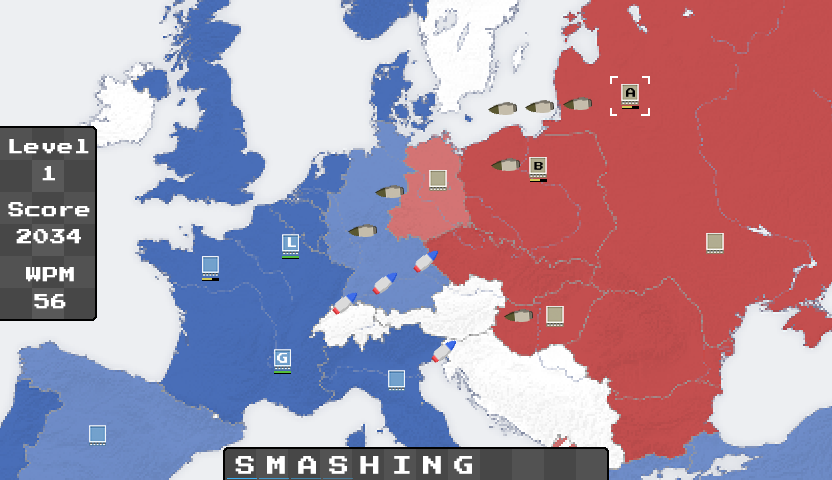
<style>
.page{position:relative;width:832px;height:480px}
.page>*{position:absolute;margin:0}
.t1{font:16px/27px "PressStart2P-Regular";letter-spacing:0.04em;color:#ffffff}
.t2{font:20px "PressStart2P-Regular";letter-spacing:0.56em;color:#ffffff}
</style>
<div class="page">
<p class="t1" style="left:9px;top:139px;width:80px;height:42px;text-align:center">Level<br>1</p>
<p class="t1" style="left:8px;top:202px;width:82px;height:42px;text-align:center">Score<br>2034</p>
<p class="t1" style="left:26px;top:267px;width:48px;height:42px;text-align:center">WPM<br>56</p>
<p class="t2" style="left:235px;top:456px;width:237px;height:18px">SMASHING</p>
</div>
